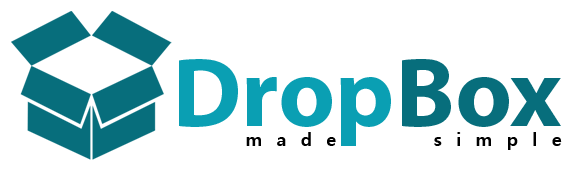
<style>
.page{position:relative;width:583px;height:171px;background:#ffffff}
.page>*{position:absolute;margin:0}
.t1{font:99.1px "MyriadPro-Bold";color:#0a9fb3}
.t2{font:99.1px "MyriadPro-Bold";color:#076e7c}
.t3{font:18px "MalgunGothicBold";letter-spacing:0.8em;color:#000000}
</style>
<div class="page">
<p class="t1" style="left:179px;top:59px;width:382px;height:87px">Drop<span class="t2">Box</span></p>
<p class="t3" style="left:246px;top:132px;width:316px;height:18px">made    simple</p>
</div>
